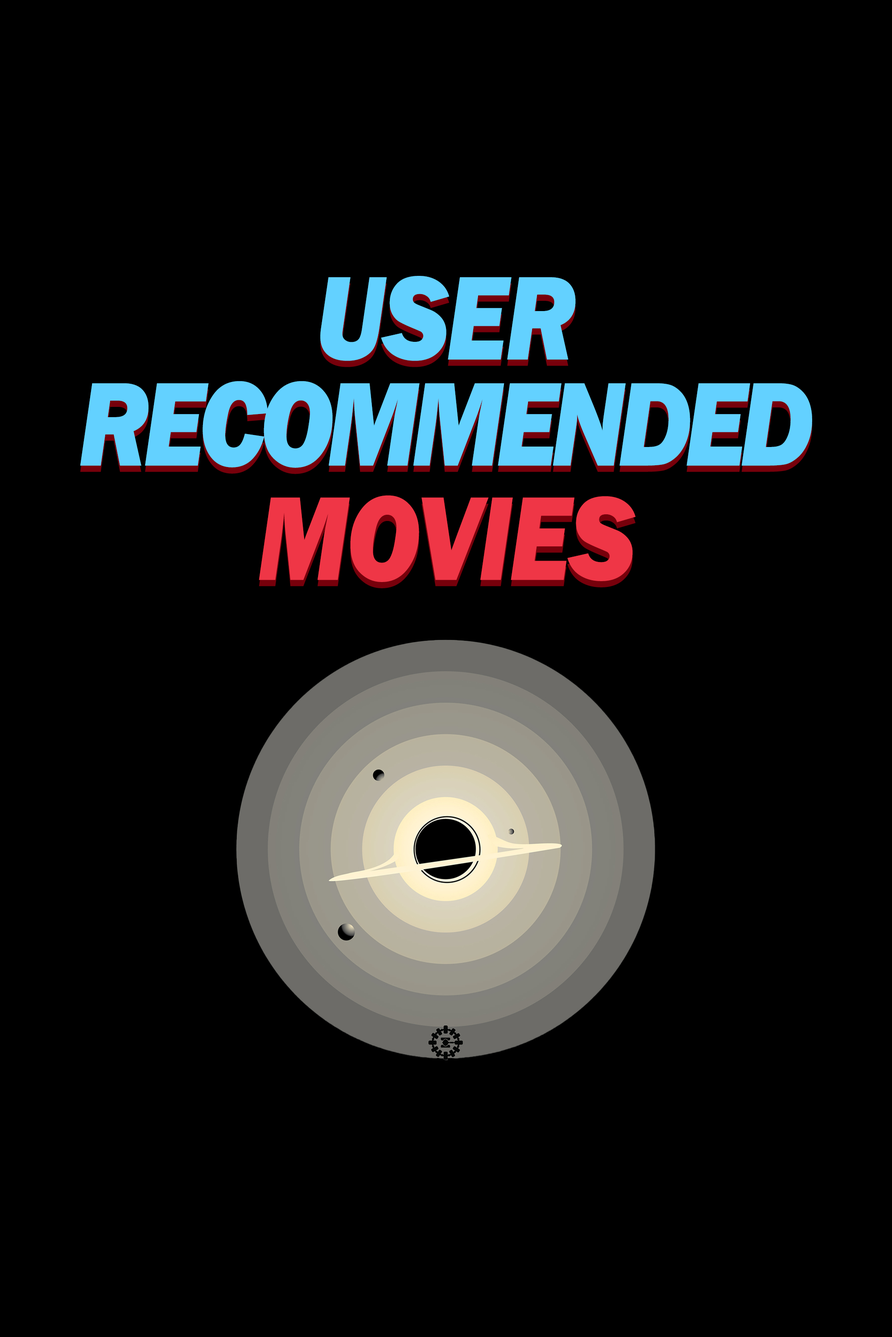
<style>
.page{position:relative;width:892px;height:1337px;background:#000000}
.page>*{position:absolute;margin:0}
.t1{font:123.5px/106px "FranklinGothic-HeavyItalic";letter-spacing:-0.06em;color:#63d1ff;scale:0.87 1}
.t2{font:123.5px/106px "FranklinGothic-HeavyItalic";letter-spacing:-0.02em;color:#63d1ff;scale:0.87 1}
.t3{font:123.5px "FranklinGothic-HeavyItalic";letter-spacing:-0.02em;color:#ef3646;scale:0.87 1}
</style>
<div class="page">
<p class="t1" style="left:80px;top:276px;width:732px;height:192px;text-align:center"><span class="t2">USER <br></span>RECOMMENDED</p>
<p class="t3" style="left:259px;top:495px;width:376px;height:87px">MOVIES</p>
</div>
